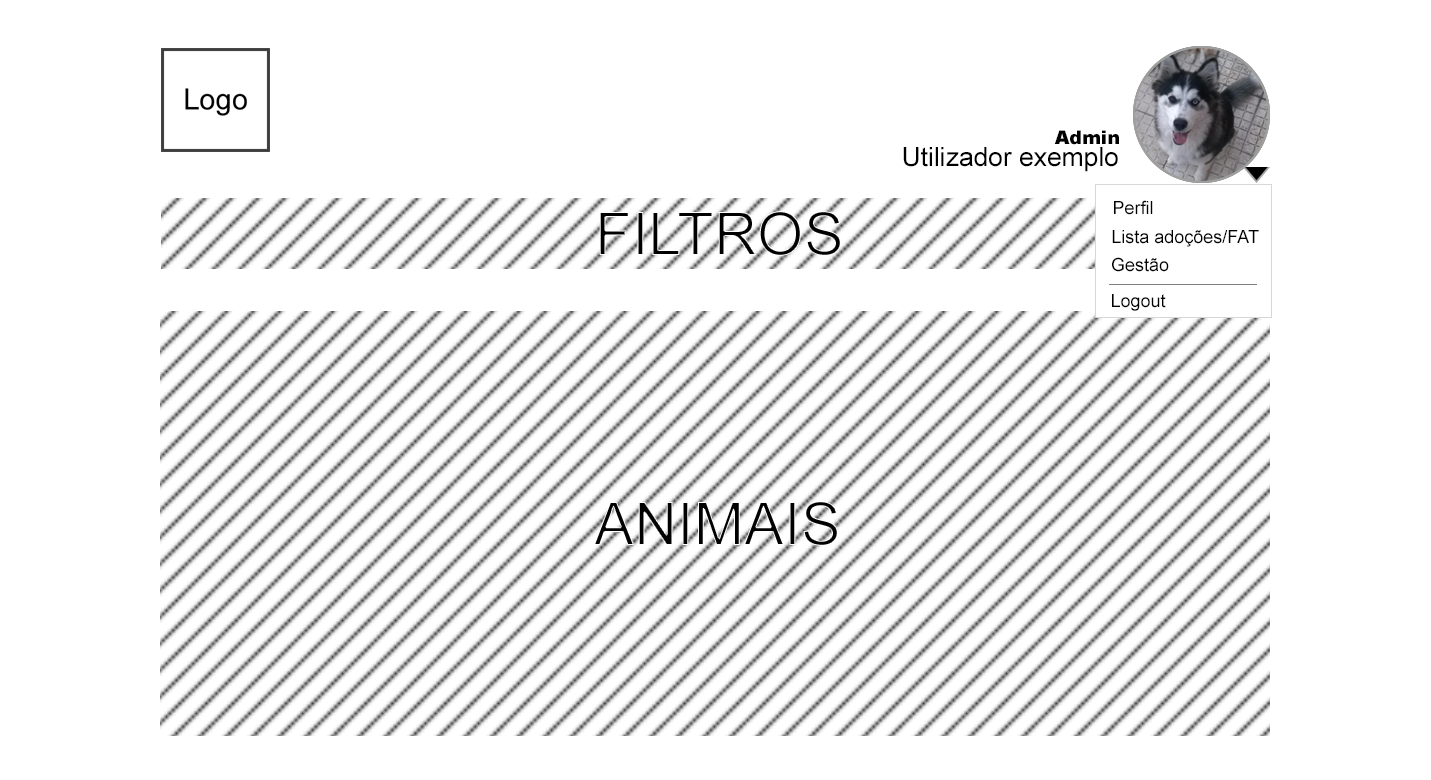
<style>
.page{position:relative;width:1431px;height:780px;background:#ffffff}
.page>*{position:absolute;margin:0}
.t1{font:18.9px "Arial-Black";color:#000000}
.t2{font:26.4px "ArialMT";color:#000000}
.t3{font:18px "ArialMT";color:#000000}
.t4{font:60px "ArialMT"}
</style>
<div class="page">
<p class="t1" style="left:1054px;top:130px;width:65px;height:15px">Admin</p>
<p class="t2" style="left:903px;top:147px;width:215px;height:25px">Utilizador exemplo</p>
<p class="t3" style="left:1114px;top:200px;width:39px;height:15px">Perfil</p>
<p class="t4" style="left:599px;top:211px;width:242px;height:45px">FILTROS</p>
<p class="t3" style="left:1112px;top:230px;width:147px;height:17px">Lista adoções/FAT</p>
<p class="t3" style="left:1112px;top:257px;width:57px;height:15px">Gestão</p>
<p class="t3" style="left:1112px;top:294px;width:54px;height:17px">Logout</p>
<p class="t4" style="left:594px;top:501px;width:244px;height:45px">ANIMAIS</p>
</div>
